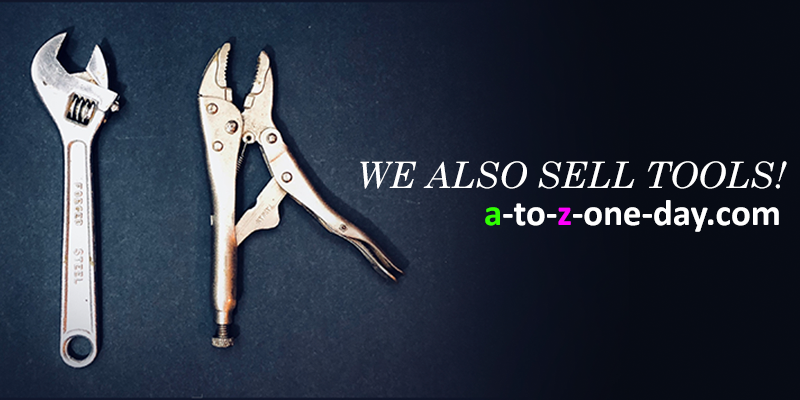
<style>
.page{position:relative;width:800px;height:400px}
.page>*{position:absolute;margin:0}
.t1{font:36px "CenturySchoolbook-Italic";color:#ffffff}
.t2{font:37px "Calibri-Bold";color:#ffffff}
.t3{font:37px "Calibri-Bold";color:#30ff00}
.t4{font:37px "Calibri-Bold";color:#ff00fc}
</style>
<div class="page">
<p class="t1" style="left:360px;top:161px;width:427px;height:28px">WE ALSO SELL TOOLS!</p>
<p class="t2" style="left:485px;top:200px;width:294px;height:32px"><span class="t3">a</span>-to-<span class="t4">z</span>-one-day.com</p>
</div>
